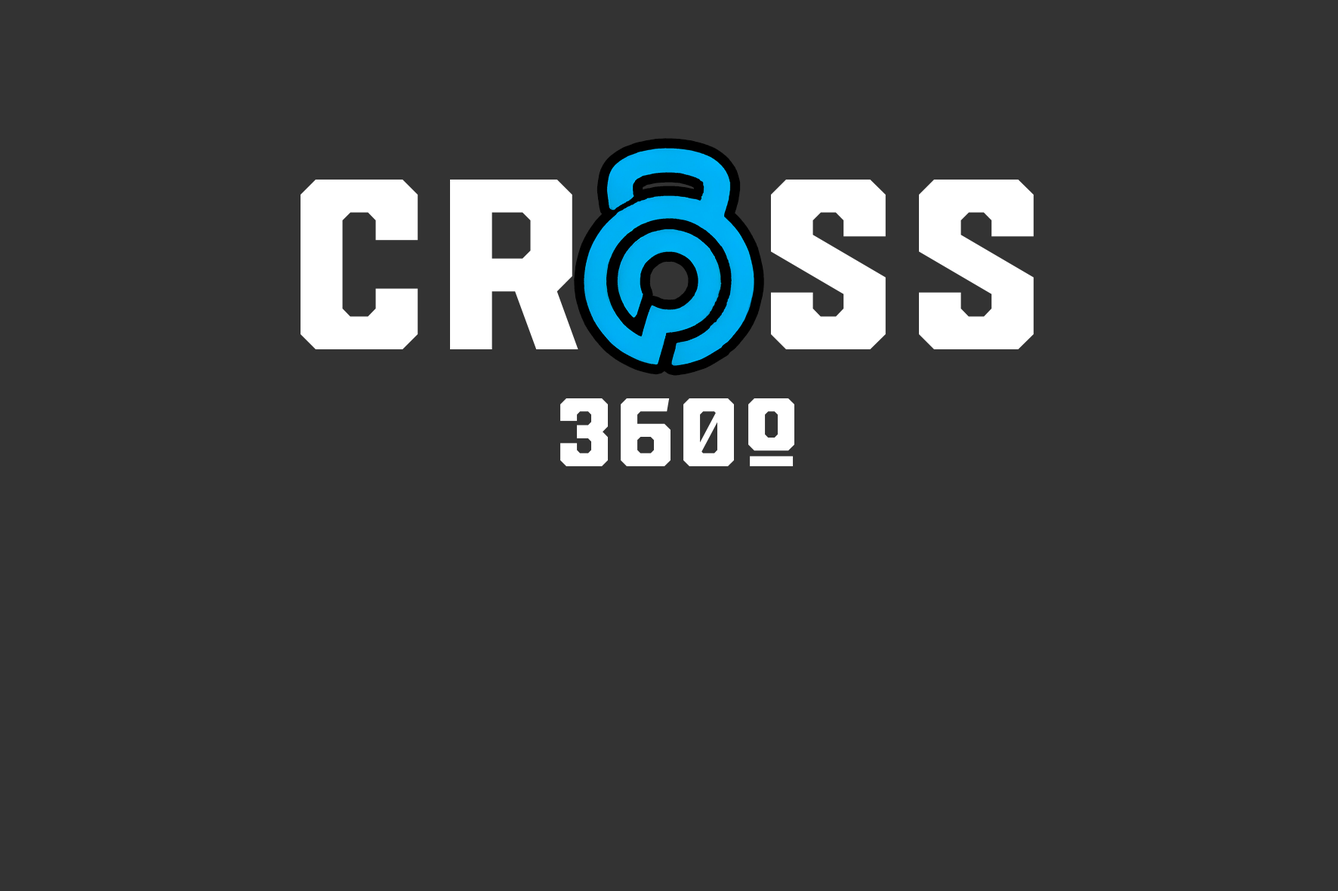
<style>
.page{position:relative;width:1338px;height:891px;background:#333333}
.page>*{position:absolute;margin:0}
.t1{font:226.5px "DroneRangerPro-Black";color:#ffffff}
.t2{font:90.2px "DroneRangerPro-Black";color:#ffffff}
</style>
<div class="page">
<p class="t1" style="left:300px;top:180px;width:733px;height:169px">Cr  ss</p>
<p class="t2" style="left:560px;top:399px;width:234px;height:67px">360º</p>
</div>
